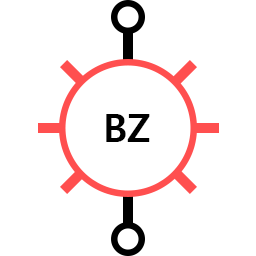
<style>
.page{position:relative;width:256px;height:256px;background:#ffffff}
.page>*{position:absolute;margin:0}
.t1{font:37.5px "MalgunGothicBold";color:#000000}
</style>
<div class="page">
<p class="t1" style="left:106px;top:114px;width:44px;height:28px">BZ</p>
</div>
